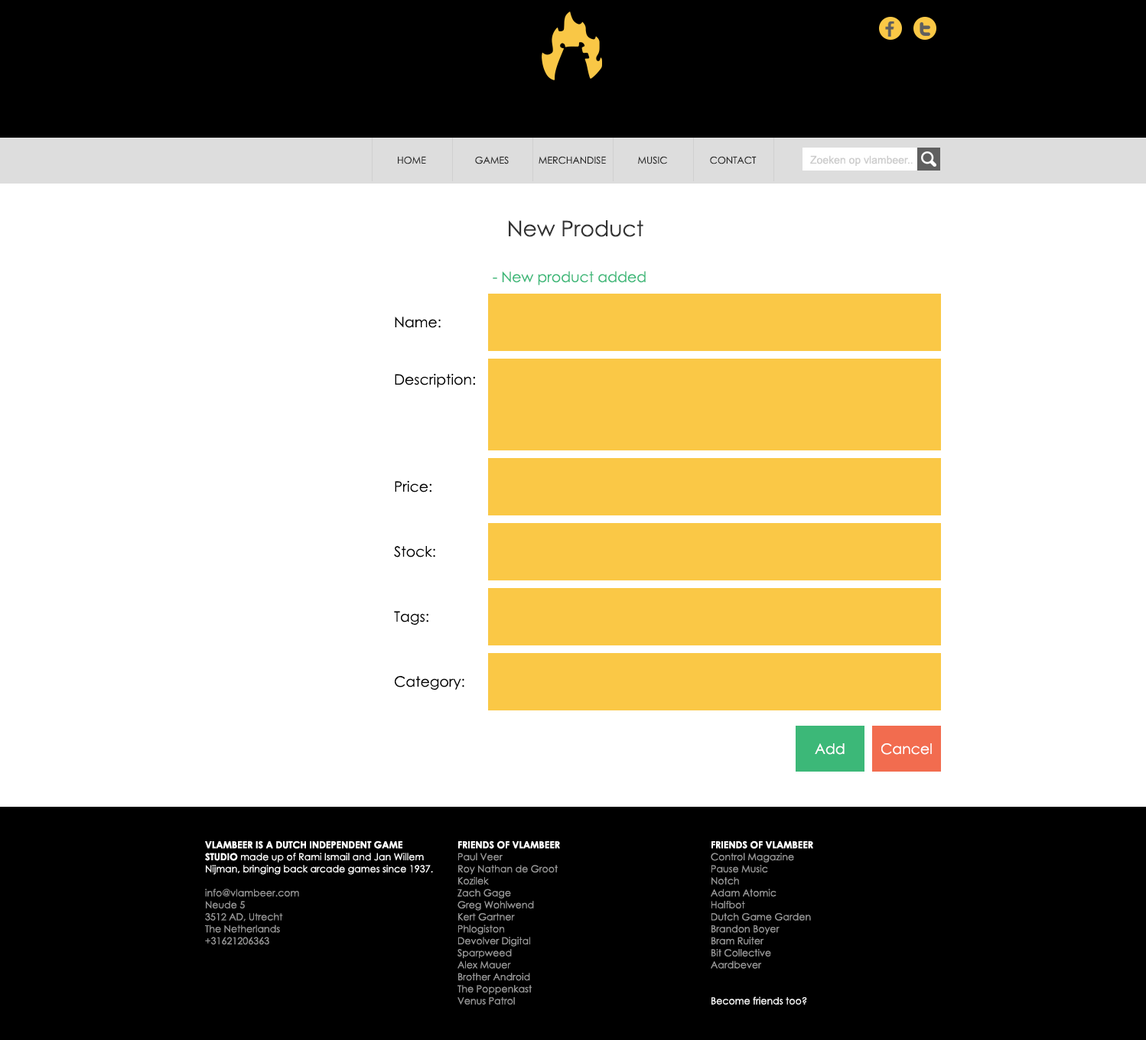
<style>
.page{position:relative;width:1146px;height:1040px;background:#ffffff}
.page>*{position:absolute;margin:0}
.t1{font:9.6px "CenturyGothic";color:#2c2c2c}
.t2{font:10.7px "ArialMT";color:#cccccc}
.t3{font:21.6px "CenturyGothic";color:#333333}
.t4{font:14.4px "CenturyGothic";color:#3cb878}
.t5{font:14.4px "CenturyGothic";color:#010101}
.t6{font:14.4px "CenturyGothic";color:#ffffff}
.t7{font:9.6px/12px "CenturyGothic";color:#ffffff}
.t8{font:9.6px/12px "CenturyGothic-Bold";color:#ffffff}
.t9{font:9.6px/12px "CenturyGothic";color:#999999}
</style>
<div class="page">
<p class="t1" style="left:398px;top:156px;width:28px;height:8px">HOME</p>
<p class="t1" style="left:475px;top:156px;width:34px;height:8px">GAMES</p>
<p class="t1" style="left:539px;top:156px;width:67px;height:8px">MERCHANDISE</p>
<p class="t1" style="left:638px;top:156px;width:29px;height:8px">MUSIC</p>
<p class="t1" style="left:710px;top:156px;width:47px;height:8px">CONTACT</p>
<p class="t2" style="left:810px;top:155px;width:103px;height:11px">Zoeken op vlambeer..</p>
<p class="t3" style="left:509px;top:220px;width:134px;height:17px">New Product</p>
<p class="t4" style="left:493px;top:271px;width:153px;height:14px">- New product added</p>
<p class="t5" style="left:395px;top:317px;width:46px;height:11px">Name:</p>
<p class="t5" style="left:395px;top:373px;width:80px;height:15px">Description:</p>
<p class="t5" style="left:395px;top:480px;width:36px;height:13px">Price:</p>
<p class="t5" style="left:394px;top:546px;width:41px;height:12px">Stock:</p>
<p class="t5" style="left:394px;top:611px;width:34px;height:14px">Tags:</p>
<p class="t5" style="left:395px;top:676px;width:69px;height:14px">Category:</p>
<p class="t6" style="left:815px;top:744px;width:30px;height:11px">Add</p>
<p class="t6" style="left:881px;top:744px;width:51px;height:11px">Cancel</p>
<p class="t7" style="left:205px;top:841px;width:228px;height:105px"><span class="t8">VLAMBEER IS A DUTCH INDEPENDENT GAME STUDIO</span> made up of Rami Ismail and Jan Willem Nijman, bringing back arcade games since 1937.<br><br><span class="t9">info@vlambeer.com <br>Neude 5<br>3512 AD, Utrecht<br>The Netherlands<br>+31621206363</span></p>
<p class="t9" style="left:458px;top:841px;width:102px;height:164px"><span class="t8">FRIENDS OF VLAMBEER<br></span>Paul Veer<br>Roy Nathan de Groot<br>Kozilek<br>Zach Gage<br>Greg Wohlwend<br>Kert Gartner<br>Phlogiston<br>Devolver Digital<br>Sparpweed<br>Alex Mauer<br>Brother Android<br>The Poppenkast<br>Venus Patrol</p>
<p class="t9" style="left:711px;top:841px;width:102px;height:164px"><span class="t8">FRIENDS OF VLAMBEER<br></span>Control Magazine<br>Pause Music<br>Notch<br>Adam Atomic<br>Halfbot<br>Dutch Game Garden<br>Brandon Boyer<br>Bram Ruiter<br>Bit Collective<br>Aardbever<br><br><br><span class="t7">Become friends too?</span></p>
</div>
